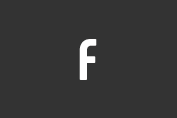
<style>
.page{position:relative;width:177px;height:118px;background:#333333}
.page>*{position:absolute;margin:0}
.t1{font:58.3px "Phenomena-ExtraBold";color:#fffefe}
</style>
<div class="page">
<p class="t1" style="left:79px;top:39px;width:18px;height:41px">F</p>
</div>
